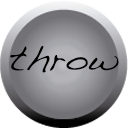
<style>
.page{position:relative;width:128px;height:128px;background:#ffffff}
.page>*{position:absolute;margin:0}
.t1{font:36px "Handwriting-Dakota";color:#000000}
</style>
<div class="page">
<p class="t1" style="left:10px;top:45px;width:109px;height:28px">throw</p>
</div>
